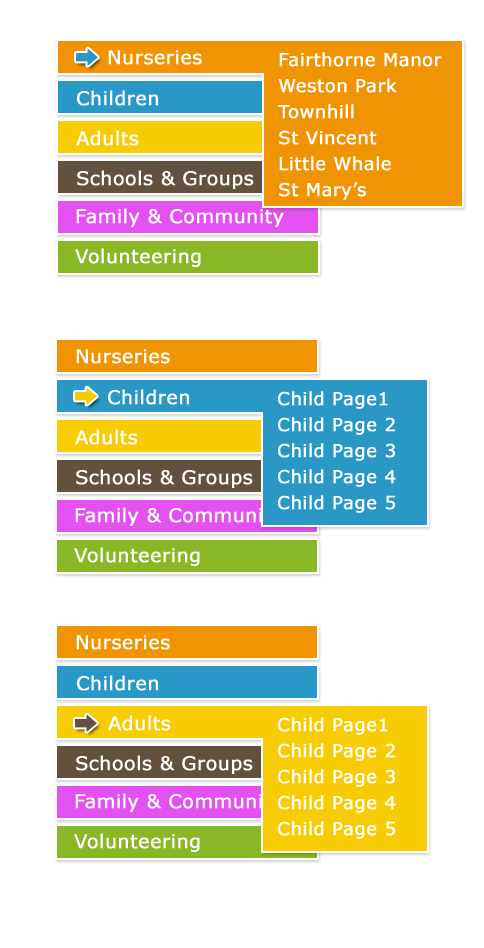
<style>
.page{position:relative;width:484px;height:948px;background:#ffffff}
.page>*{position:absolute;margin:0}
.t1{font:19px "Verdana";letter-spacing:0.005em;color:#ffffff;font-weight:bold}
.t2{font:18px/26px "Verdana";letter-spacing:0.005em;color:#ffffff;font-weight:bold}
</style>
<div class="page">
<p class="t1" style="left:108px;top:50px;width:94px;height:15px">Nurseries</p>
<p class="t2" style="left:278px;top:52px;width:164px;height:148px;text-align:justify">Fairthorne Manor<br>Weston Park<br>Townhill<br>St Vincent<br>Little Whale<br>St Mary’s</p>
<p class="t1" style="left:77px;top:90px;width:81px;height:16px">Children</p>
<p class="t1" style="left:76px;top:130px;width:63px;height:16px">Adults</p>
<p class="t1" style="left:77px;top:170px;width:177px;height:19px">Schools &amp; Groups</p>
<p class="t1" style="left:76px;top:208px;width:208px;height:19px">Family &amp; Community</p>
<p class="t1" style="left:75px;top:248px;width:126px;height:19px">Volunteering</p>
<p class="t1" style="left:76px;top:349px;width:94px;height:15px">Nurseries</p>
<p class="t1" style="left:108px;top:389px;width:81px;height:16px">Children</p>
<p class="t2" style="left:278px;top:391px;width:118px;height:122px;text-align:justify">Child Page1<br>Child Page 2<br>Child Page 3<br>Child Page 4<br>Child Page 5</p>
<p class="t1" style="left:75px;top:429px;width:63px;height:16px">Adults</p>
<p class="t1" style="left:76px;top:469px;width:177px;height:19px">Schools &amp; Groups</p>
<p class="t1" style="left:75px;top:507px;width:208px;height:19px">Family &amp; Community</p>
<p class="t1" style="left:74px;top:547px;width:126px;height:19px">Volunteering</p>
<p class="t1" style="left:76px;top:635px;width:94px;height:15px">Nurseries</p>
<p class="t1" style="left:77px;top:675px;width:81px;height:16px">Children</p>
<p class="t1" style="left:108px;top:715px;width:63px;height:16px">Adults</p>
<p class="t2" style="left:278px;top:717px;width:118px;height:122px;text-align:justify">Child Page1<br>Child Page 2<br>Child Page 3<br>Child Page 4<br>Child Page 5</p>
<p class="t1" style="left:76px;top:755px;width:177px;height:19px">Schools &amp; Groups</p>
<p class="t1" style="left:75px;top:793px;width:208px;height:19px">Family &amp; Community</p>
<p class="t1" style="left:74px;top:833px;width:126px;height:19px">Volunteering</p>
</div>
